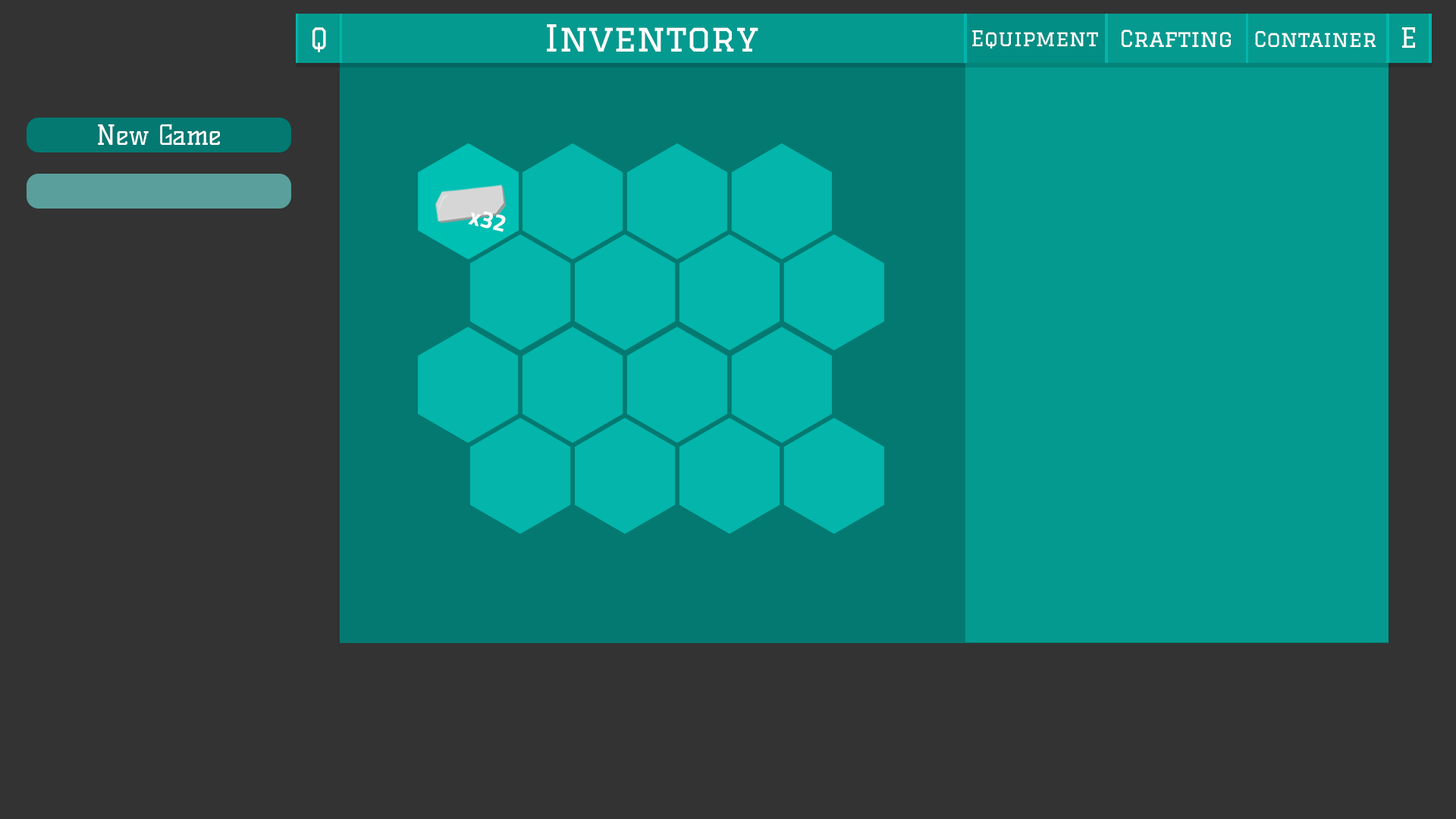
<style>
.page{position:relative;width:1456px;height:819px;background:#333333}
.page>*{position:absolute;margin:0}
.t1{font:29.1px "Graduate-Regular";color:#ffffff;scale:0.94 1}
.t2{font:36.4px "Graduate-Regular";color:#ffffff}
.t3{font:22.7px "Graduate-Regular";color:#ffffff}
.t4{font:27.3px "Graduate-Regular";color:#ffffff}
.t5{font:21.2px "Graduate-Regular";color:#ffffff}
.t6{font:27.3px "KellySlab-Regular";color:#ffffff}
.t7{font:23.5px "TitilliumWeb-Bold";color:#ffffff}
</style>
<div class="page">
<p class="t1" style="left:312px;top:27px;width:14px;height:25px">Q</p>
<p class="t2" style="left:547px;top:24px;width:211px;height:28px">Inventory</p>
<p class="t3" style="left:1122px;top:30px;width:109px;height:17px">Crafting</p>
<p class="t4" style="left:1402px;top:27px;width:13px;height:21px">E</p>
<p class="t5" style="left:972px;top:30px;width:126px;height:19px">Equipment</p>
<p class="t5" style="left:1255px;top:31px;width:121px;height:16px">Container</p>
<p class="t6" style="left:98px;top:124px;width:122px;height:21px">New Game</p>
<p class="t7" style="left:468px;top:212px;width:38px;height:20px;rotate:14deg">x32</p>
</div>
